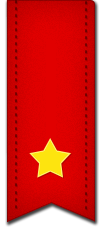
<style>
.page{position:relative;width:100px;height:240px}
.page>*{position:absolute;margin:0}
.t1{font:12px "Helvetica";scale:0.96 1}
</style>
<div class="page">
<p class="t1" style="left:15px;top:0px;width:2px;height:209px;rotate:90deg">- - - - - - - - - - - - - - - - - - - - - - - - - - - - - -</p>
<p class="t1" style="left:85px;top:1px;width:2px;height:209px;rotate:90deg">- - - - - - - - - - - - - - - - - - - - - - - - - - - - - -</p>
</div>
